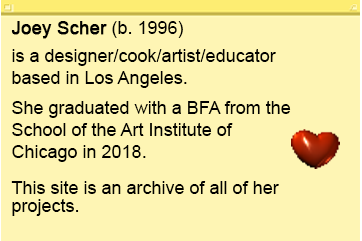
<style>
.page{position:relative;width:362px;height:241px;background:#fef5b4}
.page>*{position:absolute;margin:0}
.t1{font:18px/22px "ArialMT";color:#000000}
.t2{font:18px/28px "ArialMT";color:#000000;font-weight:bold}
.t3{font:18px/28px "ArialMT";color:#000000}
.t4{font:18px/18px "ArialMT";color:#000000}
</style>
<div class="page">
<p class="t1" style="left:11px;top:21px;width:280px;height:195px"><span class="t2">Joey Scher</span><span class="t3"> (b. 1996) <br>i</span>s a designer/cook/artist/educator<br>based in Los Angeles. <br><br>She graduated with a BFA from the School of the Art Institute of <br>Chicago in 2018.<br><span class="t4"><br>This site is an archive of all of her <br>projects.</span></p>
</div>
